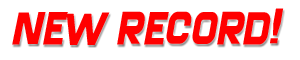
<style>
.page{position:relative;width:300px;height:60px;background:#ffffff}
.page>*{position:absolute;margin:0}
.t1{font:48px "Screengem-Regular";color:#ff0000;font-style:italic}
</style>
<div class="page">
<p class="t1" style="left:12px;top:8px;width:272px;height:37px">NEW RECORD!</p>
</div>
